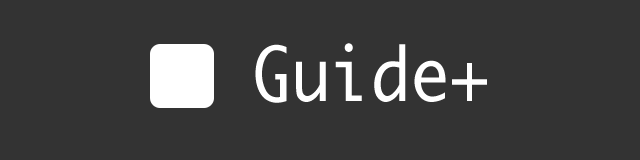
<style>
.page{position:relative;width:640px;height:160px;background:#333333}
.page>*{position:absolute;margin:0}
.t1{font:72px "Monaco";color:#ffffff;scale:0.92 1}
</style>
<div class="page">
<p class="t1" style="left:255px;top:43px;width:232px;height:60px">Guide+</p>
</div>
